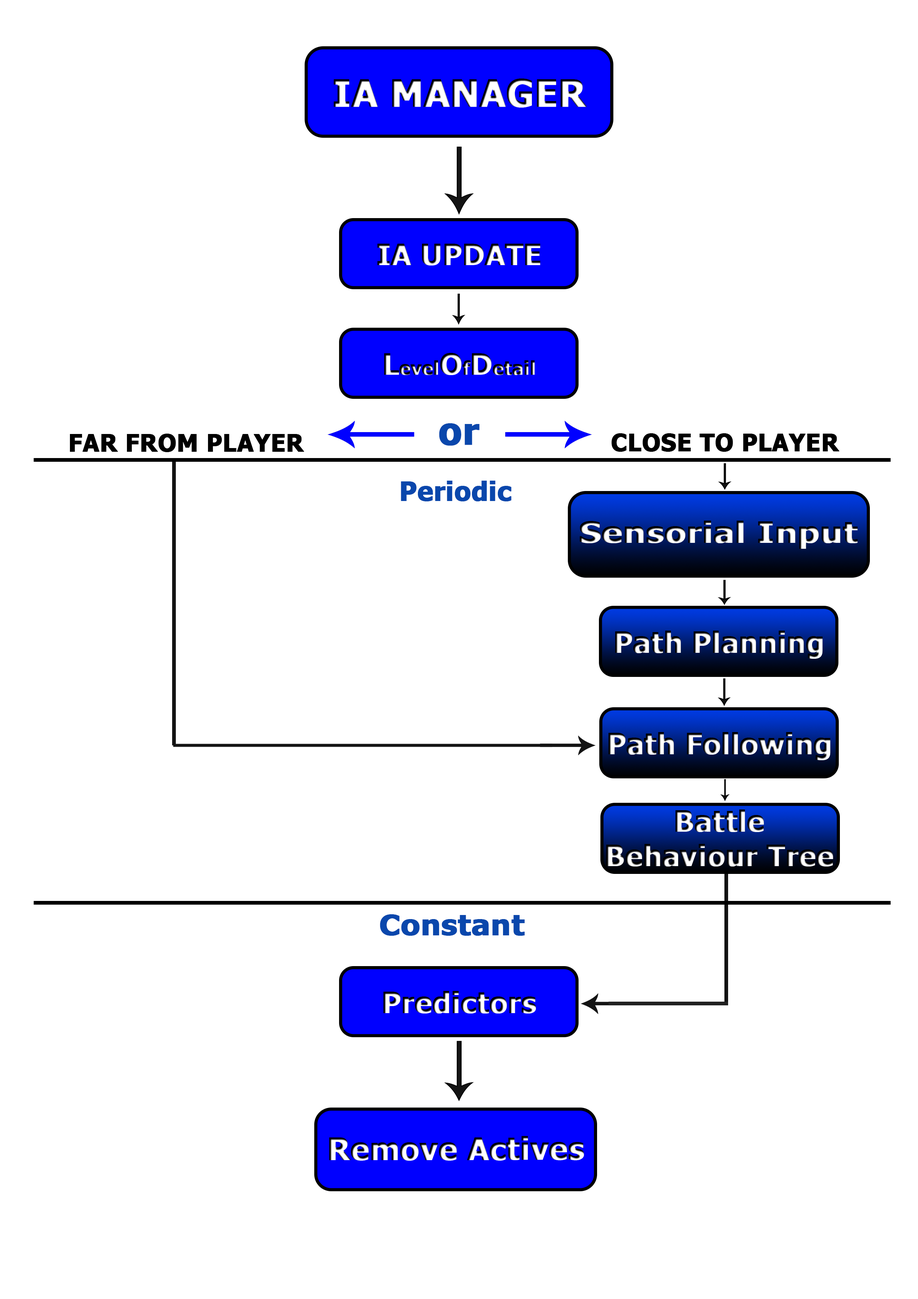
<style>
.page{position:relative;width:918px;height:1299px;background:#ffffff}
.page>*{position:absolute;margin:0}
.t1{font:37px "Tahoma-Bold";color:#ffffff;font-weight:bold}
.t2{font:28.7px "Tahoma-Bold";font-weight:bold}
.t3{font:18.5px "Tahoma-Bold";font-weight:bold}
.t4{font:37px "Tahoma-Bold";color:#0a47ac;font-weight:bold}
.t5{font:23.9px "Tahoma-Bold";color:#000000;font-weight:bold}
.t6{font:26.3px "Tahoma-Bold";color:#0a47ac;font-weight:bold}
.t7{font:28.8px "Tahoma-Bold";font-weight:bold;scale:1.19 1}
.t8{font:28.3px "Tahoma-Bold";color:#0a47ac;font-weight:bold;scale:1.09 1}
.t9{font:30.9px "Tahoma-Bold";font-weight:bold}
</style>
<div class="page">
<p class="t1" style="left:334px;top:78px;width:253px;height:30px">IA MANAGER</p>
<p class="t2" style="left:377px;top:244px;width:164px;height:21px">IA UPDATE</p>
<p class="t3" style="left:384px;top:353px;width:151px;height:22px"><span class="t2">L</span>evel<span class="t2">O</span>f<span class="t2">D</span>etail</p>
<p class="t4" style="left:439px;top:423px;width:41px;height:23px">or</p>
<p class="t5" style="left:70px;top:434px;width:234px;height:18px">FAR FROM PLAYER</p>
<p class="t5" style="left:612px;top:433px;width:228px;height:19px">CLOSE TO PLAYER</p>
<p class="t6" style="left:401px;top:481px;width:111px;height:20px">Periodic</p>
<p class="t7" style="left:580px;top:521px;width:278px;height:28px">Sensorial Input</p>
<p class="t2" style="left:615px;top:630px;width:208px;height:29px">Path Planning</p>
<p class="t2" style="left:608px;top:732px;width:223px;height:28px">Path Following</p>
<p class="t2" style="left:606px;top:809px;width:227px;height:57px;text-align:center">Battle Behaviour Tree</p>
<p class="t8" style="left:380px;top:914px;width:145px;height:22px">Constant</p>
<p class="t2" style="left:383px;top:991px;width:153px;height:22px">Predictors</p>
<p class="t9" style="left:329px;top:1135px;width:255px;height:26px">Remove Actives</p>
</div>
